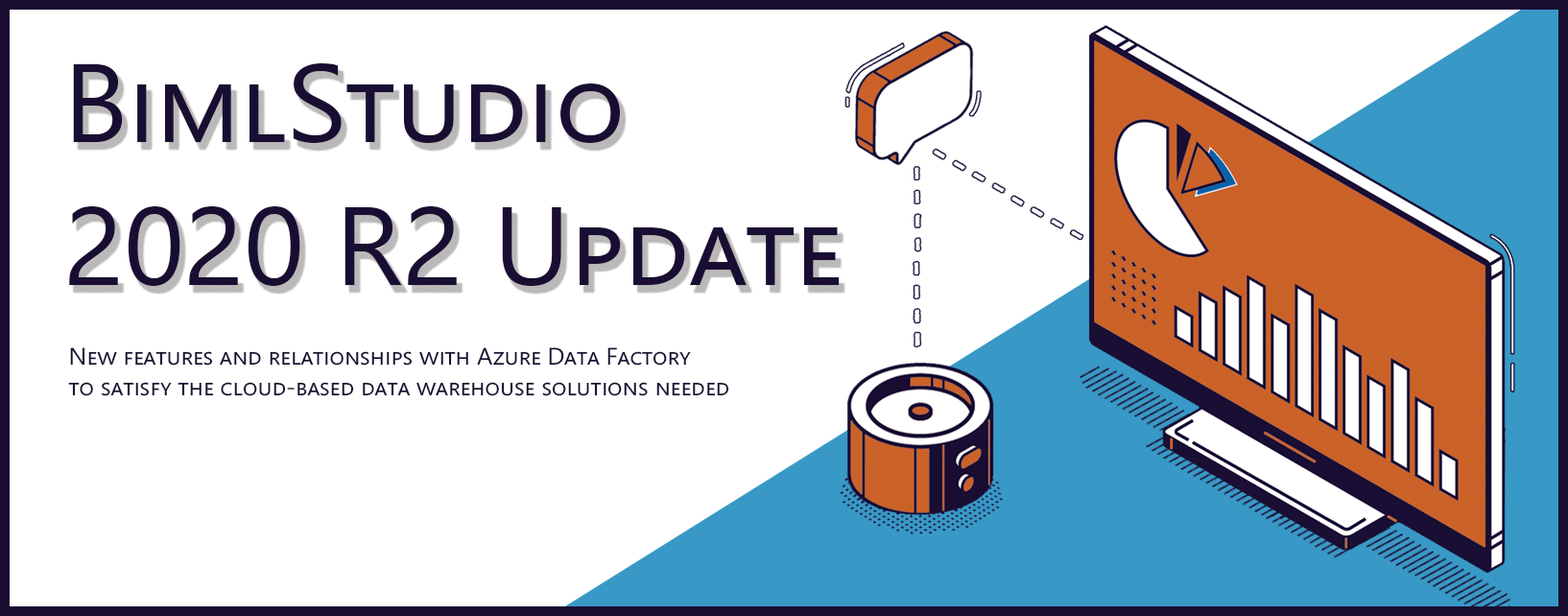
<style>
.page{position:relative;width:1568px;height:616px;background:#ffffff}
.page>*{position:absolute;margin:0}
.t1{font:110.8px "SegoeUI";color:#190e32;font-variant:small-caps}
.t2{font:23.9px "SegoeUI";color:#190e32;font-variant:small-caps}
</style>
<div class="page">
<p class="t1" style="left:69px;top:63px;width:771px;height:223px">BimlStudio <br>2020 R2 Update</p>
<p class="t2" style="left:68px;top:347px;width:661px;height:49px">New features and relationships with Azure Data Factory <br>to satisfy the cloud-based data warehouse solutions needed</p>
</div>
